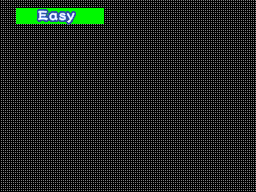
<style>
.page{position:relative;width:256px;height:192px;background:#000000}
.page>*{position:absolute;margin:0}
.t1{font:16.5px "DFLeiShoStd-W5";letter-spacing:0.075em;color:#ffffff}
.t2{font:16.5px "DFLeiShoStd-W5";letter-spacing:0.05em;color:#ffffff}
</style>
<div class="page">
<p class="t1" style="left:38px;top:11px;width:37px;height:12px"><span class="t2">E</span>asy</p>
</div>
